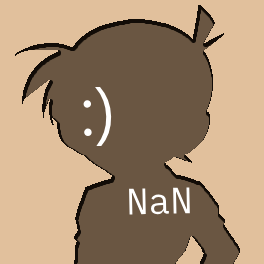
<style>
.page{position:relative;width:264px;height:264px;background:#e1c09c}
.page>*{position:absolute;margin:0}
.t1{font:68.6px "SegoeUI";color:#ffffff}
.t2{font:36.7px "IBMPlexMono-Regular";color:#ffffff}
</style>
<div class="page">
<p class="t1" style="left:83px;top:87px;width:29px;height:59px;rotate:-1deg">:)</p>
<p class="t2" style="left:129px;top:187px;width:61px;height:28px;rotate:-1deg">NaN</p>
</div>
